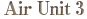
<style>
.page{position:relative;width:87px;height:19px;background:#ffffff}
.page>*{position:absolute;margin:0}
.t1{font:18px "RyuminPro-ExBold";letter-spacing:-0.04em}
</style>
<div class="page">
<p class="t1" style="left:4px;top:1px;width:80px;height:14px">Air Unit 3</p>
</div>
